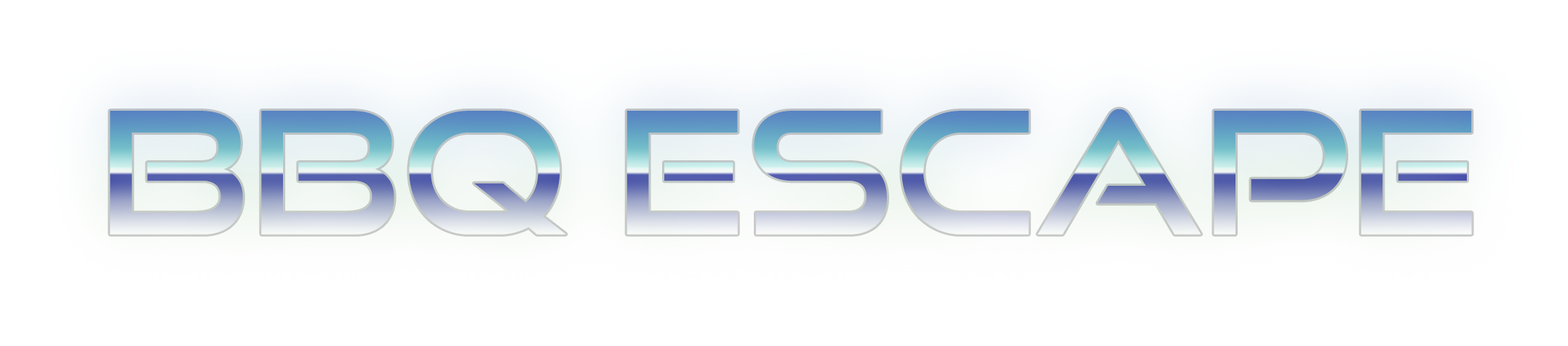
<style>
.page{position:relative;width:1568px;height:346px;background:#ffffff}
.page>*{position:absolute;margin:0}
.t1{font:169.8px "GoodTimesRg-Regular"}
</style>
<div class="page">
<p class="t1" style="left:110px;top:108px;width:1362px;height:126px">BBQ ESCAPE</p>
</div>
